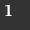
<style>
.page{position:relative;width:30px;height:30px;background:#333333}
.page>*{position:absolute;margin:0}
.t1{font:24px "PlantagenetCherokee";color:#ffffff}
</style>
<div class="page">
<p class="t1" style="left:5px;top:4px;width:7px;height:12px">1</p>
</div>
